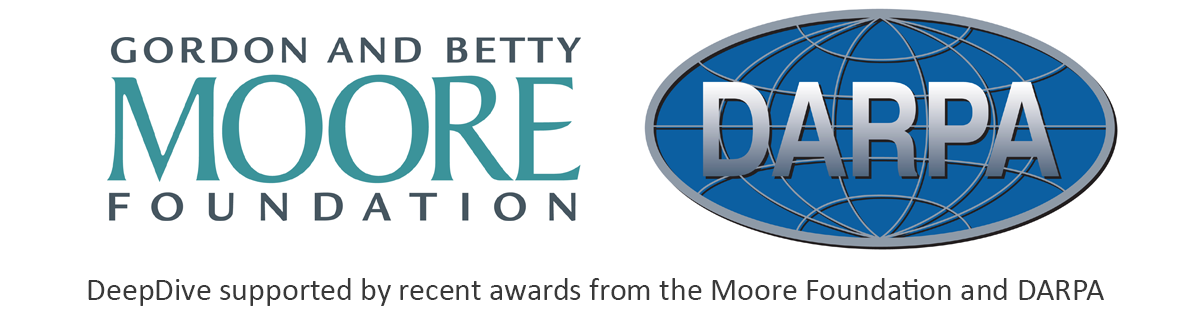
<style>
.page{position:relative;width:1200px;height:315px;background:#ffffff}
.page>*{position:absolute;margin:0}
.t1{font:32px "Calibri";color:#393939}
</style>
<div class="page">
<p class="t1" style="left:88px;top:278px;width:1016px;height:28px">DeepDive supported by recent awards from the Moore Foundation and DARPA</p>
</div>
